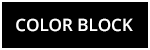
<style>
.page{position:relative;width:150px;height:50px;background:#000000}
.page>*{position:absolute;margin:0}
.t1{font:17px "OpenSans-Semibold";color:#ffffff}
</style>
<div class="page">
<p class="t1" style="left:16px;top:18px;width:117px;height:14px">COLOR BLOCK</p>
</div>
